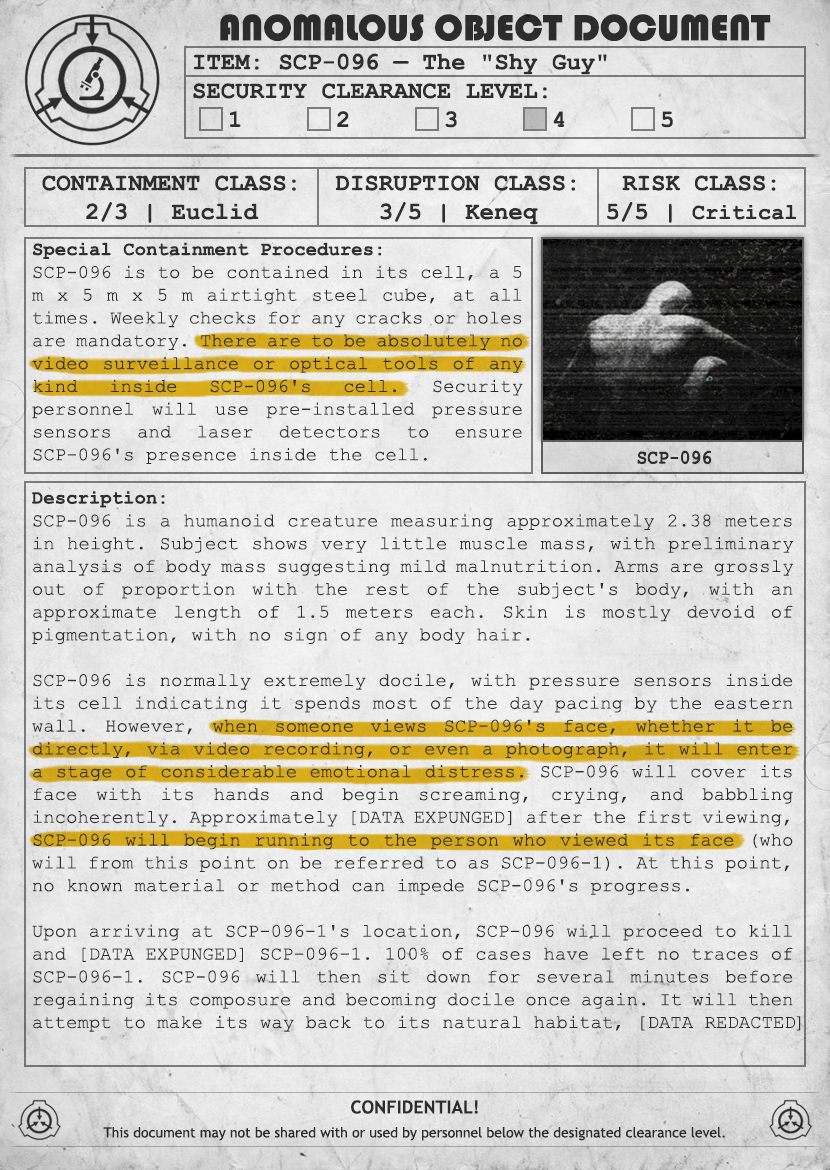
<style>
.page{position:relative;width:830px;height:1170px}
.page>*{position:absolute;margin:0}
.t1{font:38px "Bauhaus93";color:#333333;text-transform:uppercase}
.t2{font:24px "CourierNewPS-BoldMT";color:#333333}
.t3{font:24px "CourierNewPS-BoldMT";color:#333333;text-transform:uppercase}
.t4{font:22px "CourierNewPS-BoldMT";color:#333333}
.t5{font:19px "CourierNewPSMT";color:#333333}
.t6{font:19px "CourierNewPS-BoldMT";color:#333333}
.t7{font:20.1px "CourierNewPS-BoldMT";color:#333333;scale:0.9 1}
.t8{font:19px "CourierNewPSMT";letter-spacing:-0.1em;color:#333333}
.t9{font:14px/24px "TrebuchetMS";color:#333333}
.t10{font:18px/24px "TrebuchetMS-Bold";color:#333333}
</style>
<div class="page">
<p class="t1" style="left:220px;top:14px;width:551px;height:27px">anomalous object document</p>
<p class="t2" style="left:193px;top:53px;width:480px;height:75px">ITEM: SCP-096 — The "Shy Guy"<br><span class="t3">Security CLEARANCE LEVEL:</span> <br> 1   2   3   4   5</p>
<p class="t2" style="left:42px;top:175px;width:254px;height:48px;text-align:center">CONTAINMENT CLASS:<br>2/3 | Euclid</p>
<p class="t2" style="left:335px;top:175px;width:241px;height:50px;text-align:center">DISRUPTION CLASS:<br>3/5 | Keneq</p>
<p class="t2" style="left:607px;top:175px;width:190px;height:48px;text-align:center">RISK CLASS:<br>5/5 | <span class="t4">Critical</span></p>
<p class="t5" style="left:32px;top:242px;width:491px;height:222px;text-align:justify"><span class="t6">Special Containment Procedures:<br></span>SCP-096 is to be contained in its cell, a 5 m x 5 m x 5 m airtight steel cube, at all times. Weekly checks for any cracks or holes are mandatory. There are to be absolutely no video surveillance or optical tools of any kind inside SCP-096's cell. Security personnel will use pre-installed pressure sensors and laser detectors to ensure SCP-096's presence inside the cell.</p>
<p class="t7" style="left:637px;top:450px;width:75px;height:15px">SCP-096</p>
<p class="t5" style="left:32px;top:491px;width:769px;height:541px;text-align:justify"><span class="t6">Description:<br></span>SCP-096 is a humanoid creature measuring approximately 2.38 meters in height. Subject shows very little muscle mass, with preliminary analysis of body mass suggesting mild malnutrition. Arms are grossly out of proportion with the rest of the subject's body, with an approximate length of 1.5 meters each. Skin is mostly devoid of pigmentation, with no sign of any body hair.<br><br>SCP-096 is normally extremely docile, with pressure sensors inside its cell indicating it spends most of the day pacing by the eastern wall. However, when someone views SCP-096's face, whether it be directly, via video recording, or even a photograph, it will enter a stage of considerable emotional distress. SCP-096 will cover its face with its hands and begin screaming, crying, and babbling incoherently. Approximately [DATA EXPUNGED] after the first viewing, SCP-096 will begin running to the person who viewed its face (who will from this point on be referred to as SCP-096-1). At this point, no known material or method can impede SCP-096's progress.<br><br>Upon arriving at SCP-096-1's location, SCP-096 will proceed to kill and [DATA EXPUNGED] SCP-096-1. 100% of cases have left no traces of SCP-096-1. SCP-096 will then sit down for several minutes before regaining its composure and becoming docile once again. It will then attempt to make its way back to its natural habitat, [DATA REDACTE<span class="t8">D]</span></p>
<p class="t9" style="left:103px;top:1100px;width:622px;height:41px;text-align:center"><span class="t10">CONFIDENTIAL!<br></span>This document may not be shared with or used by personnel below the designated clearance level.</p>
</div>
